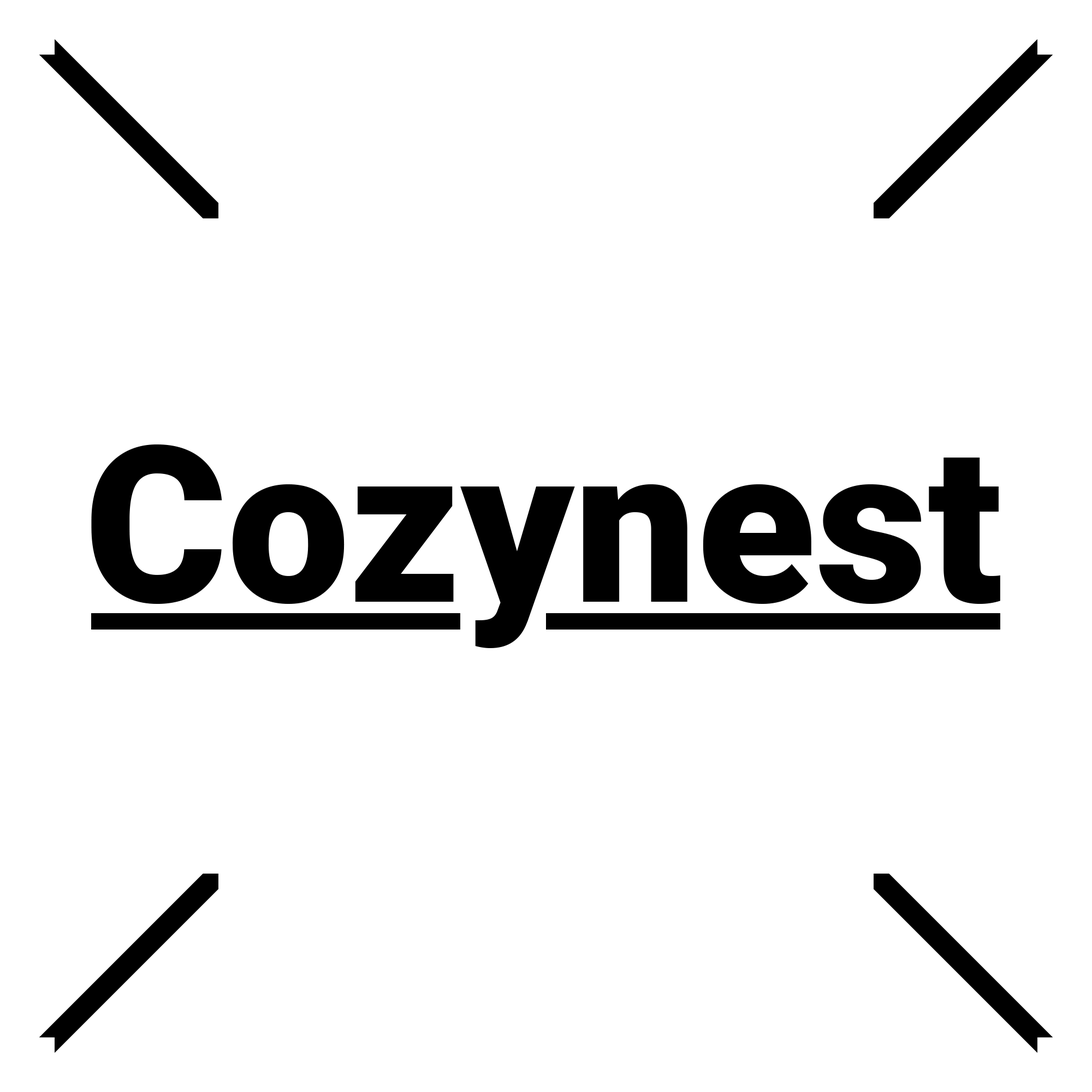
<style>
.page{position:relative;width:1092px;height:1092px;background:#ffffff}
.page>*{position:absolute;margin:0}
.t1{font:218.4px "Roboto-Black";color:#000000}
</style>
<div class="page">
<p class="t1" style="left:91px;top:444px;width:909px;height:204px">Cozynest</p>
</div>
